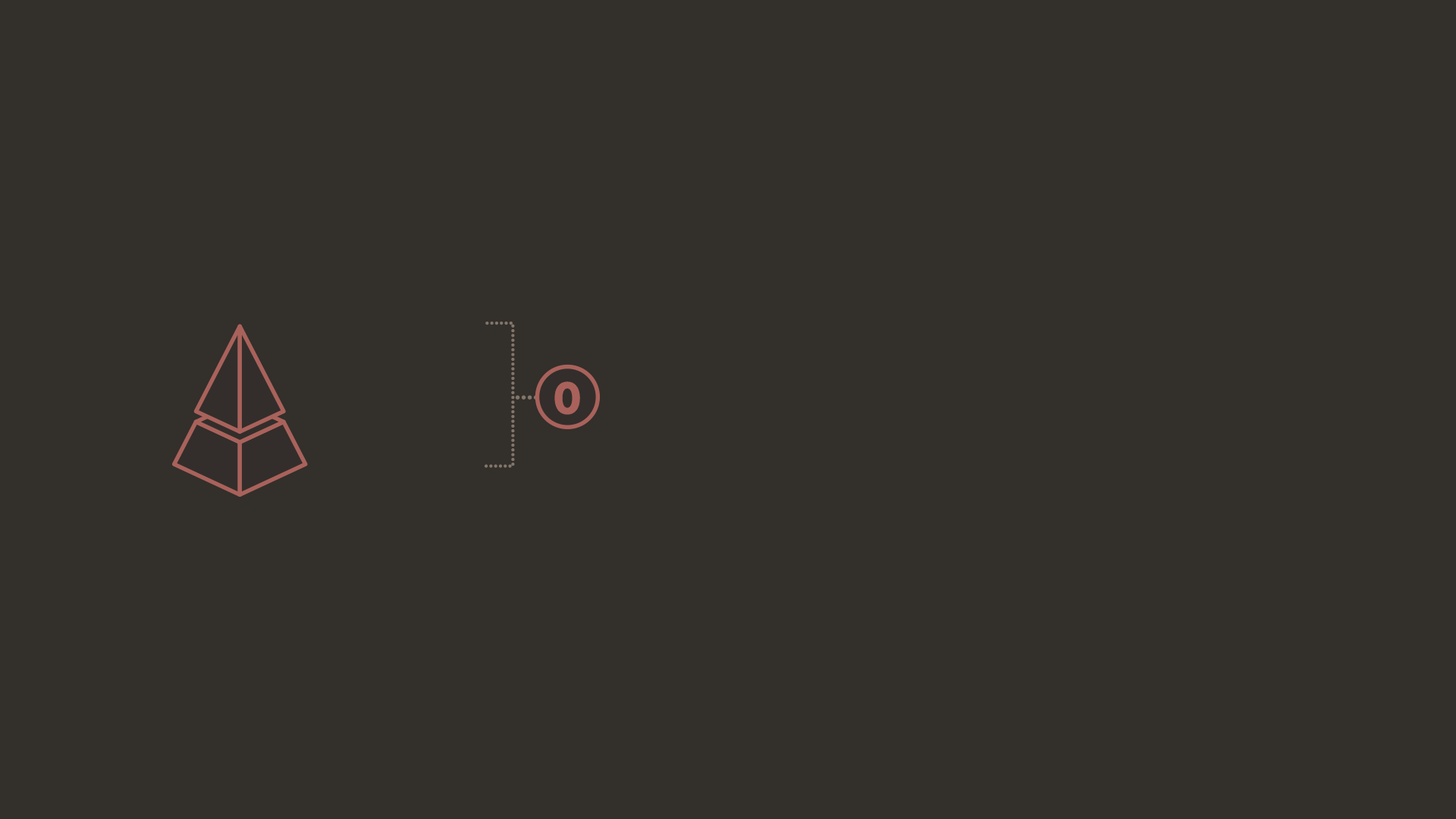
<style>
.page{position:relative;width:1456px;height:819px;background:#332f2b}
.page>*{position:absolute;margin:0}
.t1{font:47px "SourceCodeProForPowerline-Bold";color:#a9625b;font-weight:bold}
</style>
<div class="page">
<p class="t1" style="left:554px;top:381px;width:26px;height:34px">O</p>
</div>
